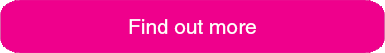
<style>
.page{position:relative;width:385px;height:53px;background:#ef008c}
.page>*{position:absolute;margin:0}
.t1{font:20.8px "HelveticaCE";color:#ffffff}
</style>
<div class="page">
<p class="t1" style="left:129px;top:19px;width:127px;height:15px">Find out more</p>
</div>
